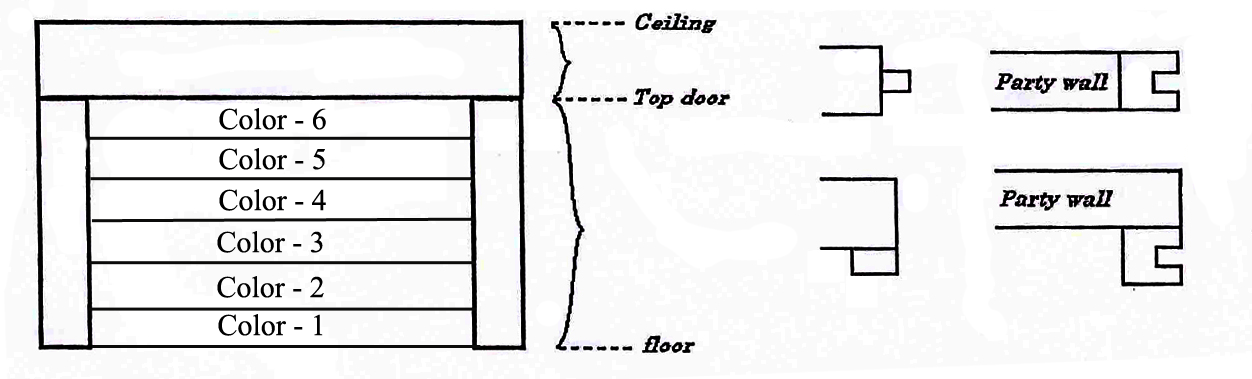
<style>
.page{position:relative;width:1252px;height:379px;background:#ffffff}
.page>*{position:absolute;margin:0}
.t1{font:30px "TimesNewRomanPSMT";color:#000000}
</style>
<div class="page">
<p class="t1" style="left:219px;top:108px;width:107px;height:22px">Color - 6</p>
<p class="t1" style="left:219px;top:148px;width:106px;height:22px">Color - 5</p>
<p class="t1" style="left:219px;top:189px;width:107px;height:22px">Color - 4</p>
<p class="t1" style="left:217px;top:231px;width:106px;height:22px">Color - 3</p>
<p class="t1" style="left:217px;top:276px;width:107px;height:22px">Color - 2</p>
<p class="t1" style="left:218px;top:314px;width:105px;height:22px">Color - 1</p>
</div>
